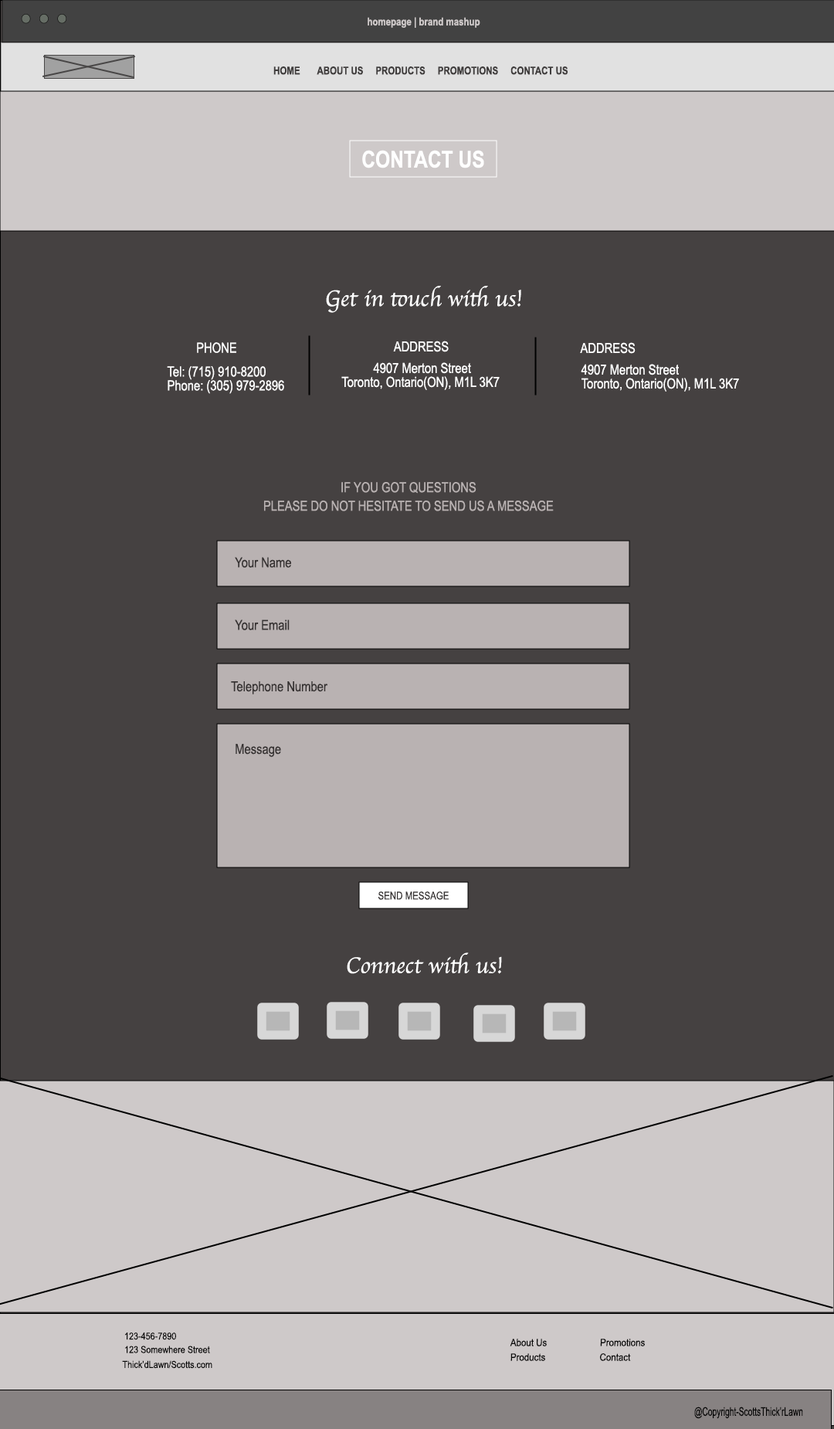
<style>
.page{position:relative;width:834px;height:1429px;background:#454141}
.page>*{position:absolute;margin:0}
.t1{font:10.8px "ArialNarrow-Bold";color:#cec9c9}
.t2{font:10.8px "ArialNarrow-Bold";color:#3f3c3c}
.t3{font:23.2px "ArialNarrow-Bold";color:#ffffff}
.t4{font:23.2px "Apple-Chancery";color:#ffffff}
.t5{font:13.9px "ArialNarrow";color:#ffffff}
.t6{font:13.9px/13.9px "ArialNarrow";color:#ffffff}
.t7{font:13.9px/18.5px "ArialNarrow";color:#b9b2b2}
.t8{font:13.9px "ArialNarrow";color:#353131}
.t9{font:10.8px "ArialNarrow";color:#353131}
.t10{font:9.7px "ArialNarrow";color:#080808;scale:1.05 1}
.t11{font:10.1px "ArialNarrow";color:#080808;scale:1.08 1}
.t12{font:11.9px "ArialNarrow";color:#080808;scale:0.81 1}
</style>
<div class="page">
<p class="t1" style="left:368px;top:17px;width:113px;height:11px">homepage | brand mashup</p>
<p class="t2" style="left:273px;top:66px;width:296px;height:9px">HOME       ABOUT US     PRODUCTS     PROMOTIONS     CONTACT US</p>
<p class="t3" style="left:362px;top:150px;width:122px;height:18px">CONTACT US</p>
<p class="t4" style="left:326px;top:286px;width:195px;height:27px">Get in touch with us!</p>
<p class="t5" style="left:393px;top:341px;width:56px;height:11px">ADDRESS</p>
<p class="t5" style="left:197px;top:342px;width:39px;height:11px">PHONE</p>
<p class="t5" style="left:580px;top:342px;width:56px;height:12px">ADDRESS</p>
<p class="t6" style="left:341px;top:362px;width:159px;height:28px;text-align:center">4907 Merton Street<br>Toronto, Ontario(ON), M1L 3K7</p>
<p class="t6" style="left:581px;top:364px;width:158px;height:28px">4907 Merton Street<br>Toronto, Ontario(ON), M1L 3K7</p>
<p class="t6" style="left:167px;top:366px;width:117px;height:28px">Tel: (715) 910-8200<br>Phone: (305) 979-2896</p>
<p class="t7" style="left:264px;top:482px;width:290px;height:29px;text-align:center">IF YOU GOT QUESTIONS<br>PLEASE DO NOT HESITATE TO SEND US A MESSAGE</p>
<p class="t8" style="left:235px;top:557px;width:56px;height:11px">Your Name</p>
<p class="t8" style="left:235px;top:620px;width:55px;height:10px">Your Email</p>
<p class="t8" style="left:231px;top:681px;width:97px;height:14px">Telephone Number</p>
<p class="t8" style="left:236px;top:744px;width:45px;height:13px">Message</p>
<p class="t9" style="left:379px;top:892px;width:70px;height:8px">SEND MESSAGE</p>
<p class="t4" style="left:347px;top:953px;width:155px;height:21px">Connect with us!</p>
<p class="t10" style="left:125px;top:1333px;width:51px;height:7px">123-456-7890</p>
<p class="t10" style="left:125px;top:1346px;width:85px;height:7px">123 Somewhere Street</p>
<p class="t11" style="left:510px;top:1339px;width:37px;height:8px">About Us</p>
<p class="t11" style="left:600px;top:1339px;width:45px;height:8px">Promotions</p>
<p class="t10" style="left:122px;top:1360px;width:90px;height:9px">Thick’dLawn/Scotts.com</p>
<p class="t11" style="left:511px;top:1353px;width:34px;height:8px">Products</p>
<p class="t11" style="left:600px;top:1353px;width:31px;height:8px">Contact</p>
<p class="t12" style="left:695px;top:1407px;width:108px;height:12px">@Copyright-ScottsThick’rLawn</p>
</div>
